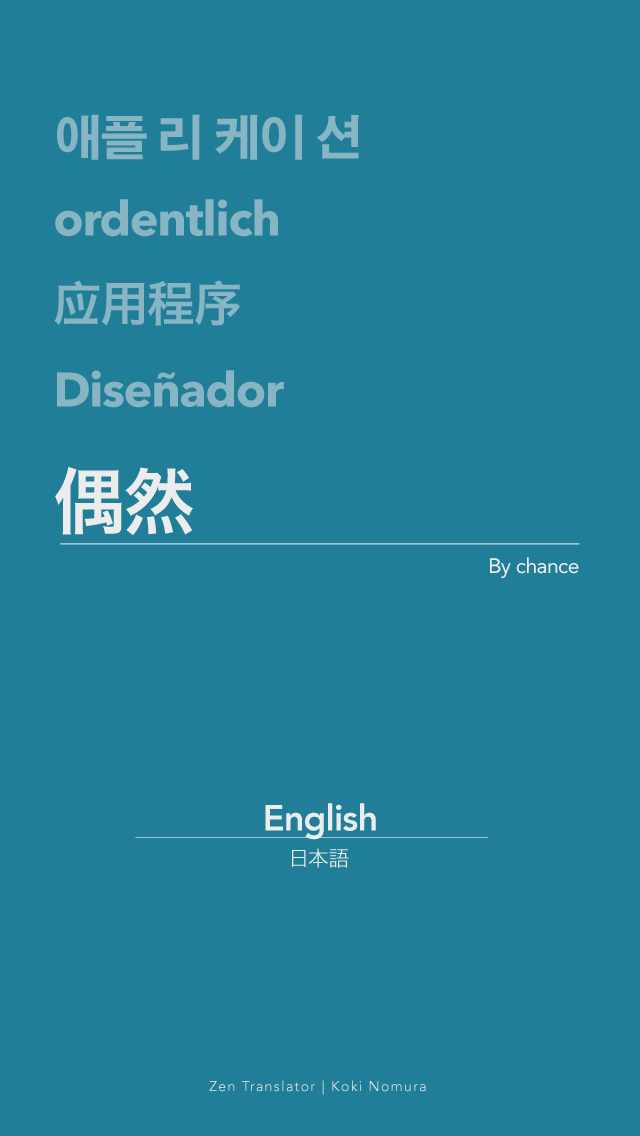
<style>
.page{position:relative;width:640px;height:1136px;background:#217e99}
.page>*{position:absolute;margin:0}
.t1{font:48px "AdobeGothicStd-Bold";letter-spacing:-0.025em;color:#87b5c3}
.t2{font:48px "AvenirNext-Bold";letter-spacing:-0.025em;color:#87b5c3}
.t3{font:48px "HiraginoSansGB-W6";letter-spacing:-0.025em;color:#87b5c3}
.t4{font:72px "HiraKakuPro-W6";letter-spacing:-0.025em;color:#ececec}
.t5{font:21px "Avenir-Roman";letter-spacing:-0.025em;color:#ececec}
.t6{font:36px "Avenir-Heavy";letter-spacing:-0.025em;color:#ececec}
.t7{font:21px "HiraKakuPro-W3";letter-spacing:-0.025em;color:#ececec}
.t8{font:14px "Avenir-Light";letter-spacing:0.1em;color:#ececec}
</style>
<div class="page">
<p class="t1" style="left:57px;top:114px;width:302px;height:46px">애플 리 케이 션</p>
<p class="t2" style="left:55px;top:199px;width:223px;height:38px">ordentlich</p>
<p class="t3" style="left:54px;top:280px;width:186px;height:46px">应用程序</p>
<p class="t2" style="left:57px;top:370px;width:227px;height:38px">Diseñador</p>
<p class="t4" style="left:55px;top:466px;width:138px;height:70px">偶然</p>
<p class="t5" style="left:490px;top:557px;width:89px;height:21px">By chance</p>
<p class="t6" style="left:265px;top:803px;width:111px;height:37px">English</p>
<p class="t7" style="left:291px;top:848px;width:58px;height:20px">日本語</p>
<p class="t8" style="left:209px;top:1080px;width:217px;height:15px">Zen Translator | Koki Nomura</p>
</div>
